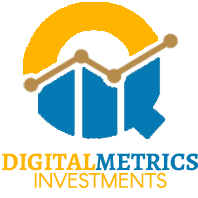
<style>
.page{position:relative;width:198px;height:198px;background:#ffffff}
.page>*{position:absolute;margin:0}
.t1{font:25.2px "AlegreyaSC-Bold";letter-spacing:-0.01em;color:#ffb400}
.t2{font:25.2px "AlegreyaSC-Bold";letter-spacing:-0.01em;color:#0479b3}
.t3{font:20.4px "Arcon-Regular";letter-spacing:-0.01em;color:#ffb400}
</style>
<div class="page">
<p class="t1" style="left:2px;top:153px;width:196px;height:18px">DIGITAL<span class="t2">METRICS</span></p>
<p class="t3" style="left:34px;top:172px;width:133px;height:16px">INVESTMENTS</p>
</div>
